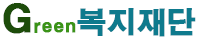
<style>
.page{position:relative;width:200px;height:40px;background:#ffffff}
.page>*{position:absolute;margin:0}
.t1{font:17.7px "H2gtrE";color:#3b9317;font-weight:bold}
.t2{font:37px "H2gtrE";color:#1d4c0a;font-weight:bold}
.t3{font:29px "H2gtrE";color:#0e7a8d;font-weight:bold}
</style>
<div class="page">
<p class="t1" style="left:3px;top:3px;width:193px;height:34px"><span class="t2">G</span>reen<span class="t3">복지재단</span></p>
</div>
